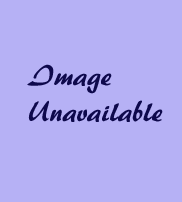
<style>
.page{position:relative;width:182px;height:202px;background:#b6b1f5}
.page>*{position:absolute;margin:0}
.t1{font:30px "ARBERKLEY";color:#0e094c}
</style>
<div class="page">
<p class="t1" style="left:27px;top:64px;width:136px;height:58px">Image<br>Unavailable</p>
</div>
